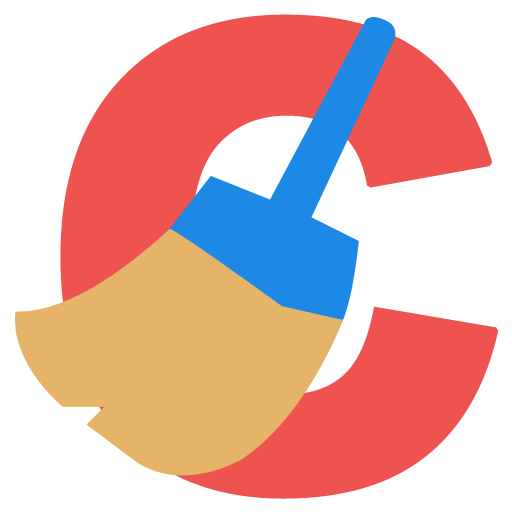
<style>
.page{position:relative;width:512px;height:512px;background:#ffffff}
.page>*{position:absolute;margin:0}
.t1{font:882.2px "Arial-BoldMT";letter-spacing:-0.1em;color:#ef5350;font-weight:bold}
</style>
<div class="page">
<p class="t1" style="left:60px;top:14px;width:439px;height:485px">c</p>
</div>
